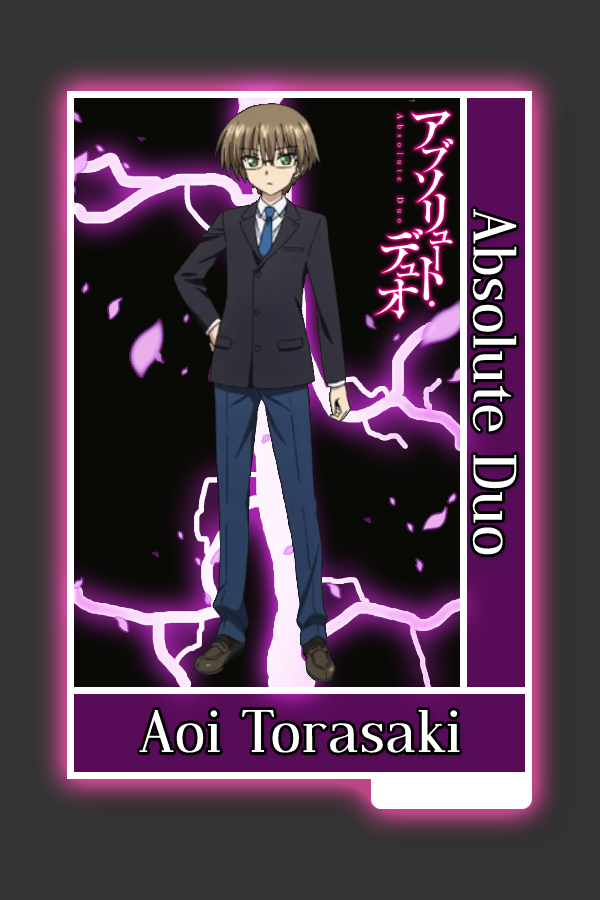
<style>
.page{position:relative;width:600px;height:900px;background:#333333}
.page>*{position:absolute;margin:0}
.t1{font:60px "DustismoRoman";color:#ffffff}
.t2{font:59px "DustismoRoman";color:#ffffff}
</style>
<div class="page">
<p class="t1" style="left:472px;top:208px;width:45px;height:347px;rotate:90deg">Absolute Duo</p>
<p class="t2" style="left:139px;top:709px;width:321px;height:44px">Aoi Torasaki</p>
</div>
